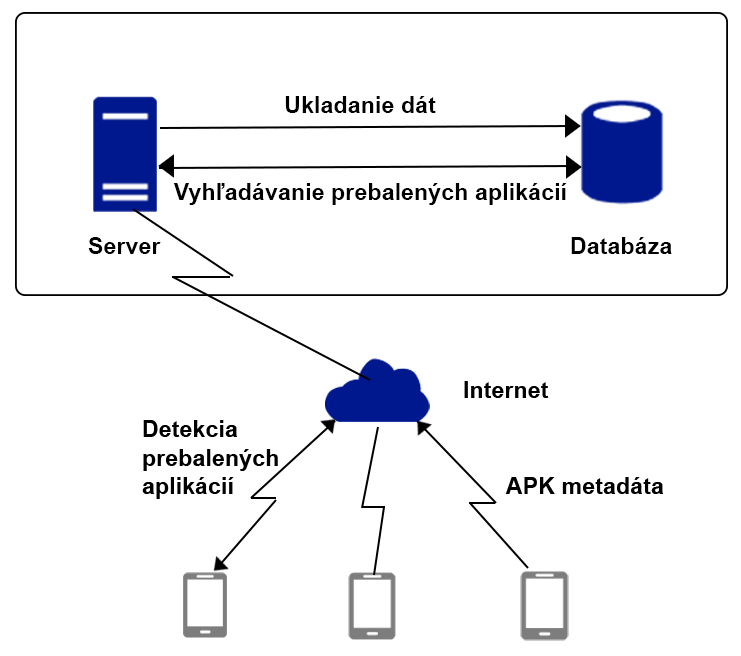
<style>
.page{position:relative;width:741px;height:656px;background:#ffffff}
.page>*{position:absolute;margin:0}
.t1{font:23.3px "Arial-BoldMT";color:#000000}
.t2{font:23.3px/28.3px "Arial-BoldMT";color:#000000}
</style>
<div class="page">
<p class="t1" style="left:285px;top:96px;width:151px;height:17px">Ukladanie dát</p>
<p class="t1" style="left:173px;top:183px;width:394px;height:22px">Vyhľadávanie prebalených aplikácií</p>
<p class="t1" style="left:88px;top:237px;width:73px;height:17px">Server</p>
<p class="t1" style="left:571px;top:237px;width:101px;height:17px">Databáza</p>
<p class="t1" style="left:464px;top:381px;width:85px;height:17px">Internet</p>
<p class="t2" style="left:142px;top:420px;width:136px;height:79px">Detekcia <br>prebalených<br>aplikácií</p>
<p class="t1" style="left:505px;top:477px;width:159px;height:17px">APK metadáta</p>
</div>
